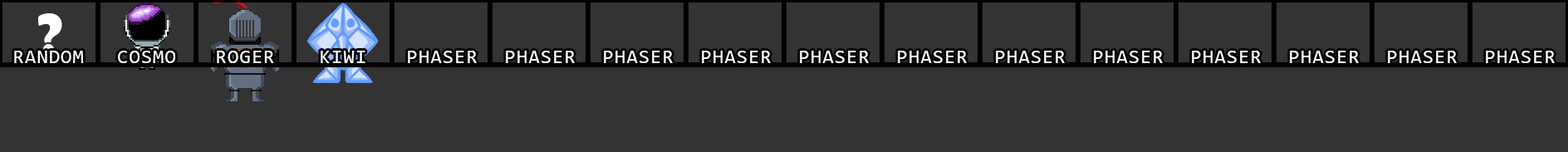
<style>
.page{position:relative;width:1568px;height:152px;background:#333333}
.page>*{position:absolute;margin:0}
.t1{font:59.8px "BerlinSansFBDemi-Bold";letter-spacing:0.05em;color:#ffffff}
.t2{font:19.9px "Consolas";letter-spacing:0.05em;color:#ffffff}
</style>
<div class="page">
<p class="t1" style="left:38px;top:13px;width:24px;height:42px">?</p>
<p class="t2" style="left:14px;top:51px;width:70px;height:12px">RANDOM</p>
<p class="t2" style="left:118px;top:51px;width:58px;height:12px">COSMO</p>
<p class="t2" style="left:217px;top:51px;width:57px;height:12px">ROGER</p>
<p class="t2" style="left:321px;top:51px;width:44px;height:12px">KIWI</p>
<p class="t2" style="left:408px;top:51px;width:69px;height:12px">PHASER</p>
<p class="t2" style="left:506px;top:51px;width:69px;height:12px">PHASER</p>
<p class="t2" style="left:604px;top:51px;width:69px;height:12px">PHASER</p>
<p class="t2" style="left:702px;top:51px;width:69px;height:12px">PHASER</p>
<p class="t2" style="left:800px;top:51px;width:69px;height:12px">PHASER</p>
<p class="t2" style="left:898px;top:51px;width:69px;height:12px">PHASER</p>
<p class="t2" style="left:996px;top:51px;width:69px;height:12px">PHASER</p>
<p class="t2" style="left:1094px;top:51px;width:69px;height:12px">PHASER</p>
<p class="t2" style="left:1192px;top:51px;width:69px;height:12px">PHASER</p>
<p class="t2" style="left:1290px;top:51px;width:69px;height:12px">PHASER</p>
<p class="t2" style="left:1388px;top:51px;width:69px;height:12px">PHASER</p>
<p class="t2" style="left:1486px;top:51px;width:69px;height:12px">PHASER</p>
</div>
